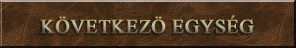
<style>
.page{position:relative;width:296px;height:48px}
.page>*{position:absolute;margin:0}
.t1{font:24px "ShonarBangla";text-transform:uppercase;font-weight:bold}
</style>
<div class="page">
<p class="t1" style="left:40px;top:15px;width:214px;height:19px">Következö egység</p>
</div>
